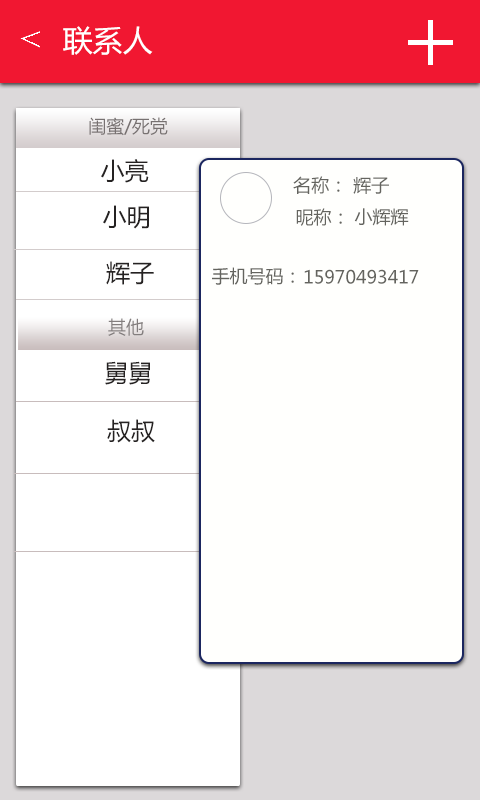
<style>
.page{position:relative;width:480px;height:800px;background:#fffffd}
.page>*{position:absolute;margin:0}
.t1{font:30px "MicrosoftYaHei";color:#ffffff}
.t2{font:18px "MicrosoftYaHei";color:#777171}
.t3{font:24px "MicrosoftYaHei";color:#252222}
.t4{font:18px "MicrosoftYaHei";color:#64645f}
.t5{font:18px "MicrosoftYaHei";color:#837e7e}
</style>
<div class="page">
<p class="t1" style="left:63px;top:26px;width:90px;height:29px">联系人</p>
<p class="t2" style="left:89px;top:117px;width:79px;height:19px">闺蜜/死党</p>
<p class="t3" style="left:101px;top:159px;width:48px;height:24px">小亮</p>
<p class="t4" style="left:293px;top:176px;width:47px;height:18px">名称：</p>
<p class="t4" style="left:353px;top:177px;width:36px;height:17px">辉子</p>
<p class="t3" style="left:103px;top:205px;width:46px;height:24px">小明</p>
<p class="t4" style="left:296px;top:208px;width:46px;height:18px">昵称：</p>
<p class="t4" style="left:354px;top:208px;width:55px;height:18px">小辉辉</p>
<p class="t3" style="left:106px;top:261px;width:48px;height:24px">辉子</p>
<p class="t4" style="left:212px;top:267px;width:82px;height:18px">手机号码：</p>
<p class="t4" style="left:304px;top:269px;width:115px;height:15px">15970493417</p>
<p class="t5" style="left:108px;top:318px;width:36px;height:18px">其他</p>
<p class="t3" style="left:105px;top:361px;width:45px;height:24px">舅舅</p>
<p class="t3" style="left:107px;top:419px;width:48px;height:24px">叔叔</p>
</div>
